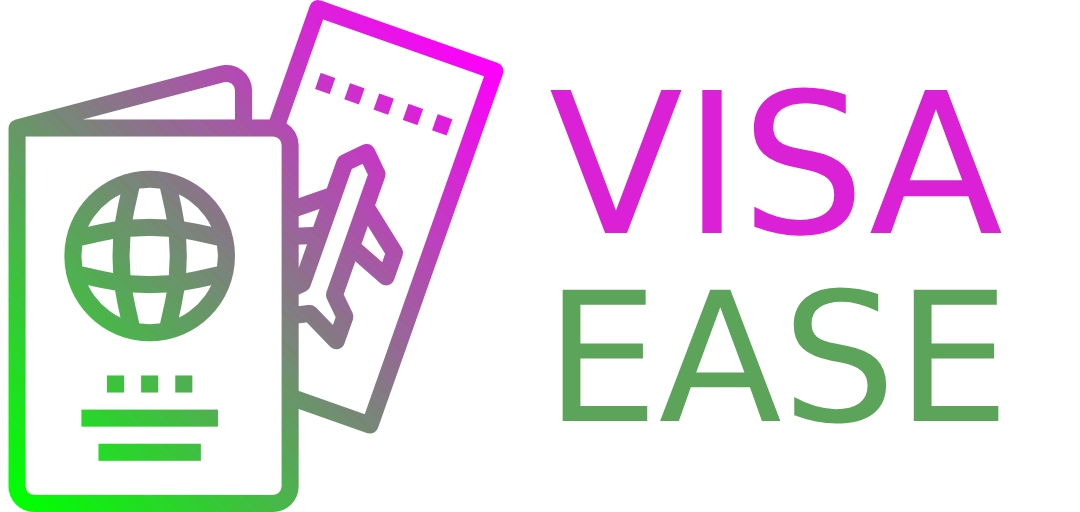
<style>
.page{position:relative;width:1080px;height:512px;background:#ffffff}
.page>*{position:absolute;margin:0}
.t1{font:196px "DejaVuSans";color:#db21d5}
.t2{font:180px "DejaVuSans";color:#5ca45a}
</style>
<div class="page">
<p class="t1" style="left:550px;top:87px;width:452px;height:149px">VISA</p>
<p class="t2" style="left:562px;top:287px;width:437px;height:137px">EASE</p>
</div>
